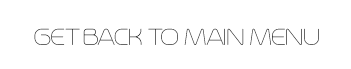
<style>
.page{position:relative;width:351px;height:69px;background:#ffffff}
.page>*{position:absolute;margin:0}
.t1{font:29.1px "Trench-Thin";letter-spacing:-0.05em;text-transform:uppercase}
</style>
<div class="page">
<p class="t1" style="left:34px;top:28px;width:285px;height:17px">GET BACK TO MAIN MENU</p>
</div>
